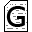
<style>
.page{position:relative;width:32px;height:32px;background:#ffffff}
.page>*{position:absolute;margin:0}
.t1{font:33.3px "EstrangeloEdessa";color:#000000}
</style>
<div class="page">
<p class="t1" style="left:6px;top:6px;width:19px;height:21px">G</p>
</div>
